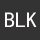
<style>
.page{position:relative;width:40px;height:40px;background:#333333}
.page>*{position:absolute;margin:0}
.t1{font:21.7px "SimHei";color:#fcf8f8}
</style>
<div class="page">
<p class="t1" style="left:5px;top:12px;width:32px;height:15px">BLK</p>
</div>
